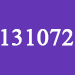
<style>
.page{position:relative;width:75px;height:75px;background:#6435b5}
.page>*{position:absolute;margin:0}
.t1{font:24px "TimesNewRomanPSMT";color:#ffffff;font-weight:bold}
</style>
<div class="page">
<p class="t1" style="left:1px;top:29px;width:73px;height:17px">131072</p>
</div>
